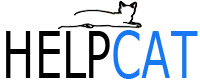
<style>
.page{position:relative;width:200px;height:80px;background:#ffffff}
.page>*{position:absolute;margin:0}
.t1{font:63.9px "Verdana";color:#000000;scale:0.67 1}
.t2{font:63.9px "Verdana";color:#1877f2;scale:0.67 1}
</style>
<div class="page">
<p class="t1" style="left:6px;top:30px;width:192px;height:49px">HELP<span class="t2">CAT</span></p>
</div>
